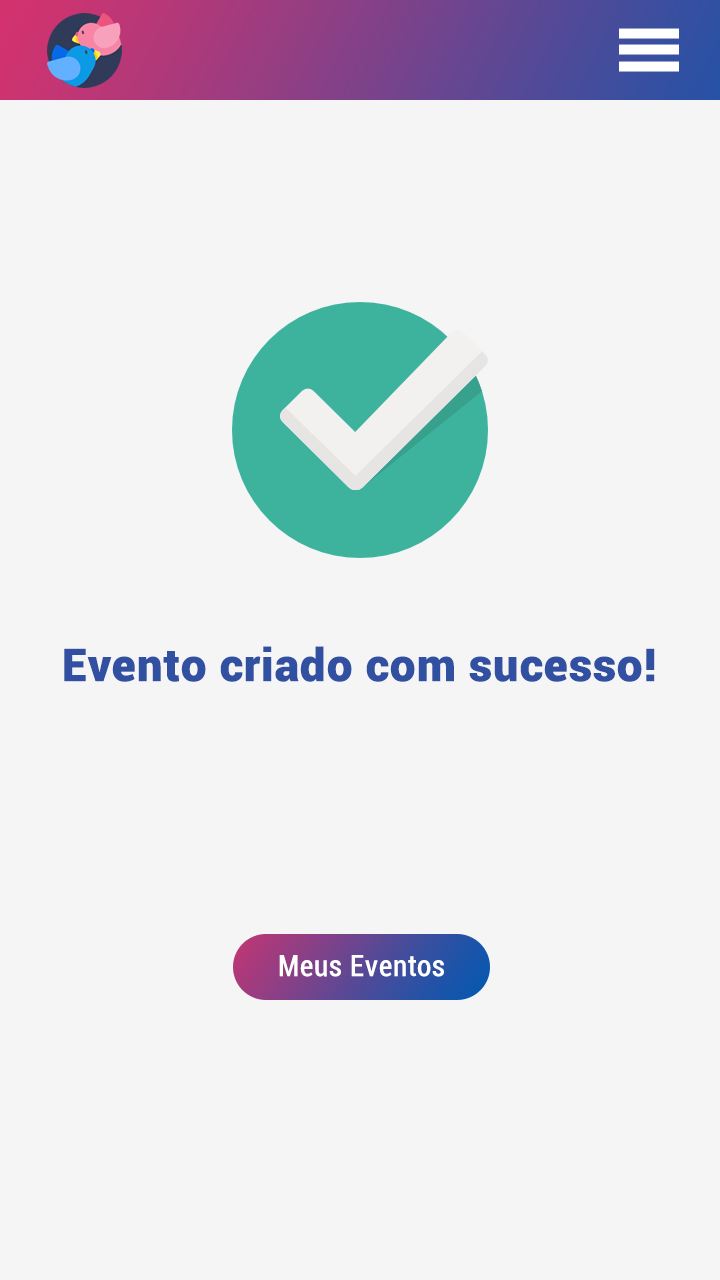
<style>
.page{position:relative;width:720px;height:1280px;background:#f5f5f5}
.page>*{position:absolute;margin:0}
.t1{font:45px "Roboto-Black";color:#3150a1;font-weight:bold}
.t2{font:29px "Roboto-Condensed";color:#ffffff;font-weight:bold}
</style>
<div class="page">
<p class="t1" style="left:64px;top:646px;width:591px;height:36px">Evento criado com sucesso!</p>
<p class="t2" style="left:279px;top:955px;width:165px;height:22px">Meus Eventos</p>
</div>
